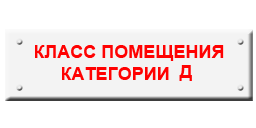
<style>
.page{position:relative;width:256px;height:128px;background:#ffffff}
.page>*{position:absolute;margin:0}
.t1{font:18px "Arial-BoldMT";color:#ff0101}
</style>
<div class="page">
<p class="t1" style="left:35px;top:45px;width:189px;height:36px;text-align:center">КЛАСС ПОМЕЩЕНИЯ<br>КАТЕГОРИИ  Д</p>
</div>
